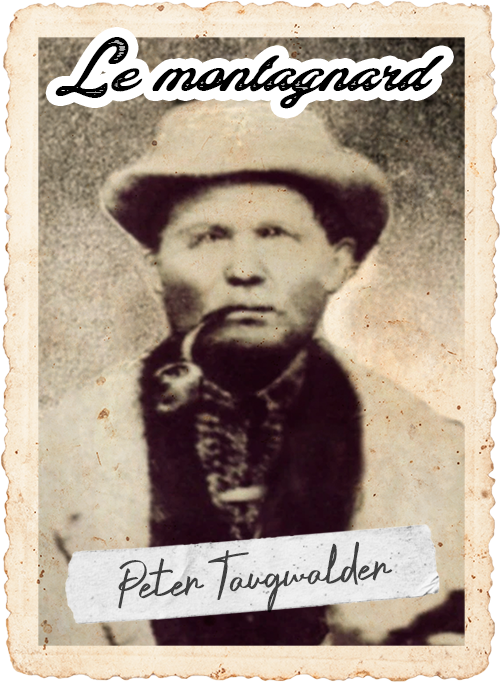
<style>
.page{position:relative;width:500px;height:682px}
.page>*{position:absolute;margin:0}
.t1{font:54.2px "ColinasPersonalUse-Regular";color:#000000}
.t2{font:54.2px "CrustaceansSignatureDEMO-Reg";color:#404040}
</style>
<div class="page">
<p class="t1" style="left:55px;top:37px;width:389px;height:72px">Le montagnard</p>
<p class="t2" style="left:118px;top:541px;width:275px;height:72px;rotate:-5deg">Peter Taugwalder</p>
</div>
